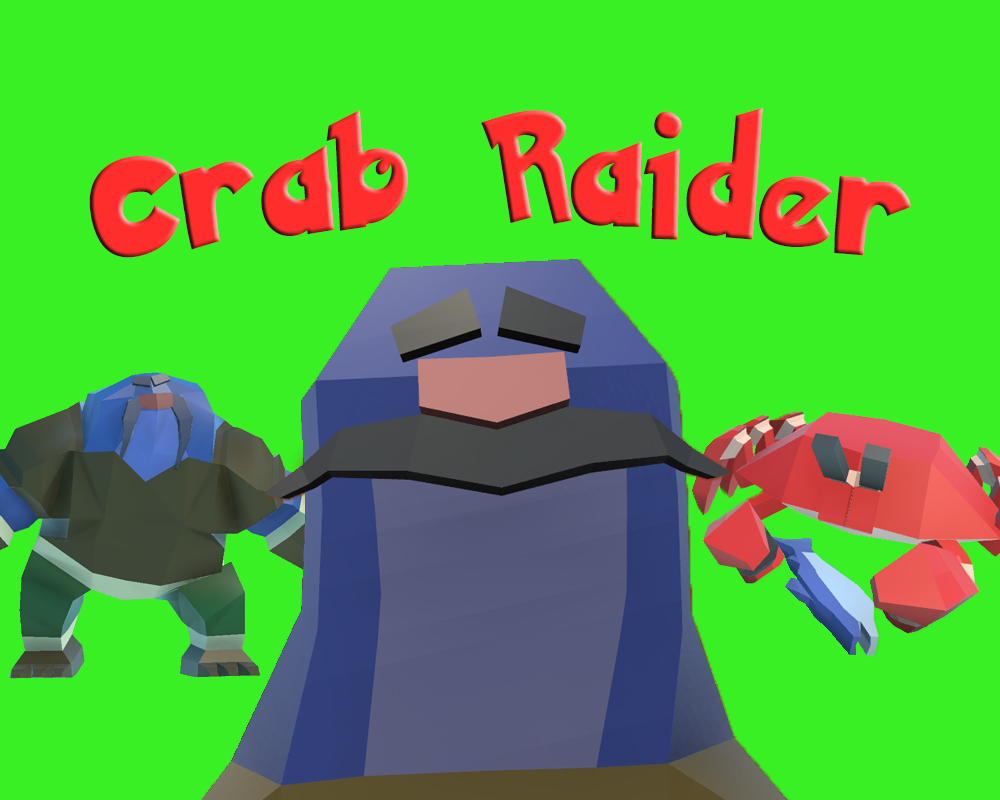
<style>
.page{position:relative;width:1000px;height:800px;background:#38f023}
.page>*{position:absolute;margin:0}
.t1{font:180.5px "PokemonNormal";letter-spacing:0.075em;color:#ff2e2d;scale:0.8 1}
</style>
<div class="page">
<p class="t1" style="left:89px;top:108px;width:822px;height:150px">Crab Raider</p>
</div>
